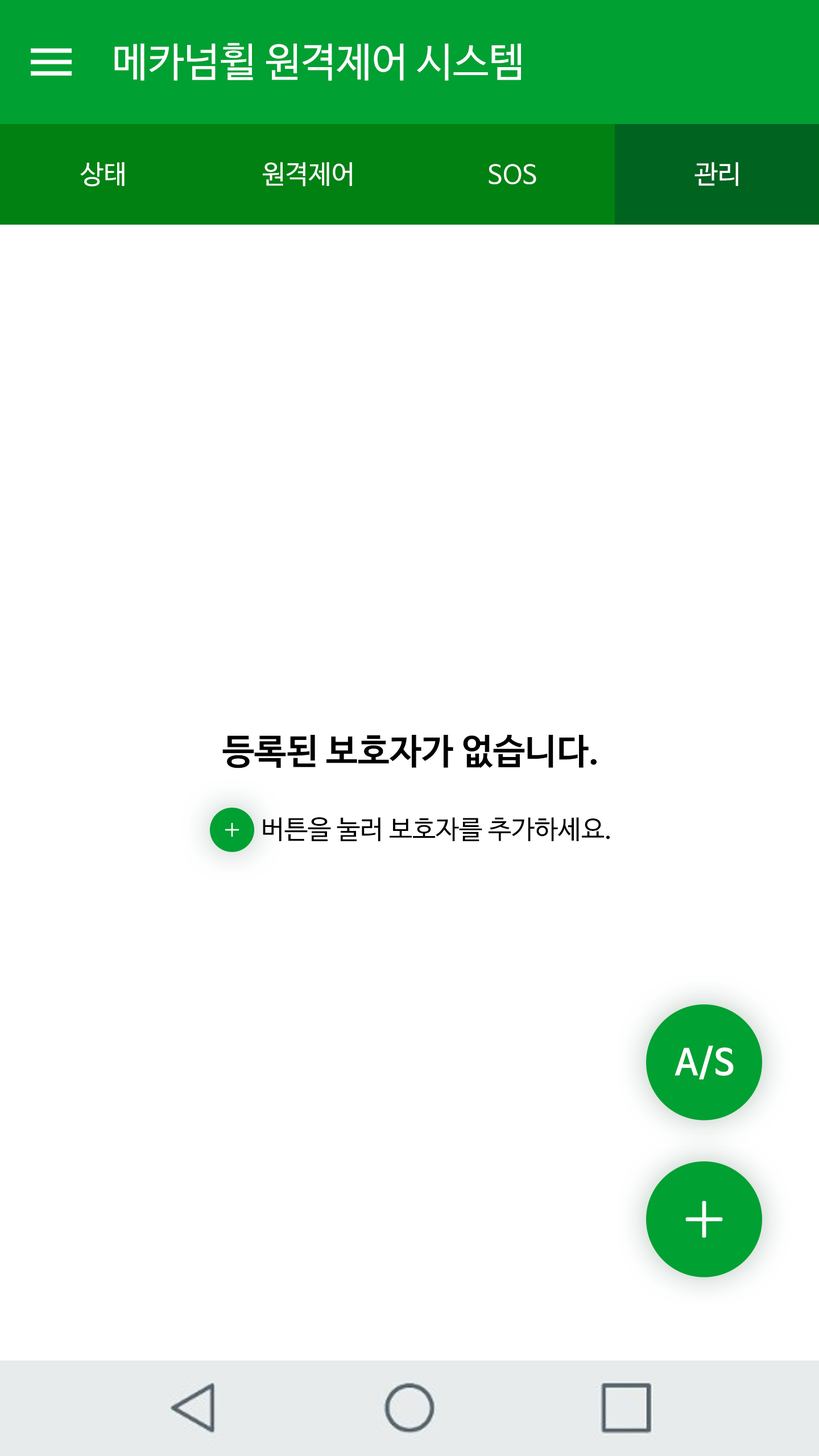
<style>
.page{position:relative;width:819px;height:1456px;background:#ffffff}
.page>*{position:absolute;margin:0}
.t1{font:40.3px "NanumBarunGothicOTF";color:#ffffff}
.t2{font:26.1px "NanumBarunGothicOTF";color:#ffffff}
.t3{font:35.5px "NanumBarunGothicOTFBold";color:#000000}
.t4{font:26.1px "NanumBarunGothicOTF";color:#000000}
.t5{font:35.5px "NanumBarunGothicOTFBold";color:#ffffff}
</style>
<div class="page">
<p class="t1" style="left:114px;top:43px;width:407px;height:38px">메카넘휠 원격제어 시스템</p>
<p class="t2" style="left:80px;top:162px;width:45px;height:25px">상태</p>
<p class="t2" style="left:263px;top:162px;width:89px;height:25px">원격제어</p>
<p class="t2" style="left:489px;top:164px;width:47px;height:20px">SOS</p>
<p class="t2" style="left:694px;top:162px;width:44px;height:24px">관리</p>
<p class="t3" style="left:222px;top:735px;width:375px;height:33px">등록된 보호자가 없습니다.</p>
<p class="t4" style="left:263px;top:817px;width:347px;height:24px">버튼을 눌러 보호자를 추가하세요.</p>
<p class="t5" style="left:675px;top:1045px;width:59px;height:34px">A/S</p>
</div>
